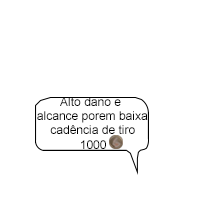
<style>
.page{position:relative;width:200px;height:200px;background:#ffffff}
.page>*{position:absolute;margin:0}
.t1{font:12px "ArialMT";color:#000000}
</style>
<div class="page">
<p class="t1" style="left:37px;top:97px;width:111px;height:52px;text-align:center">Alto dano e alcance porem baixa cadência de tiro<br>1000</p>
</div>
